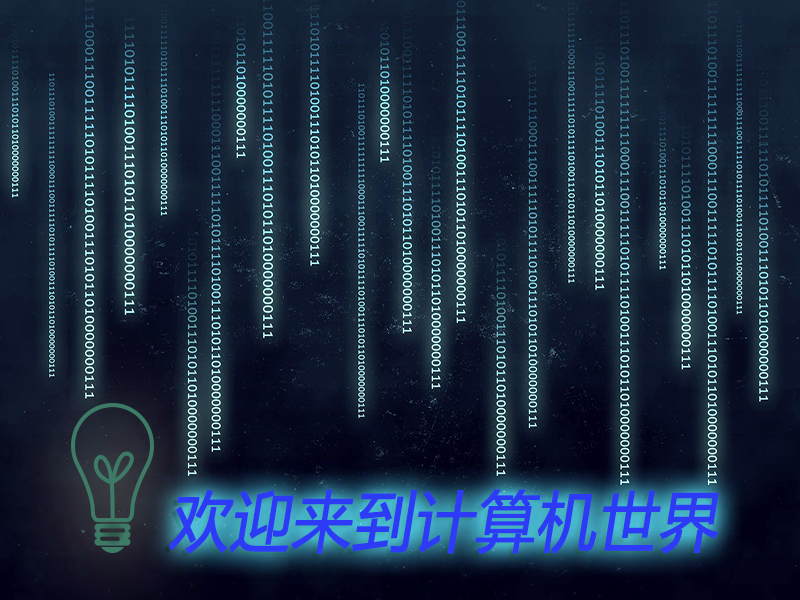
<style>
.page{position:relative;width:800px;height:600px}
.page>*{position:absolute;margin:0}
.t1{font:65.2px "MicrosoftYaHei";color:#2d3bf6;font-weight:bold;font-style:italic;scale:0.91 1}
</style>
<div class="page">
<p class="t1" style="left:168px;top:489px;width:551px;height:66px">欢迎来到计算机世界</p>
</div>
